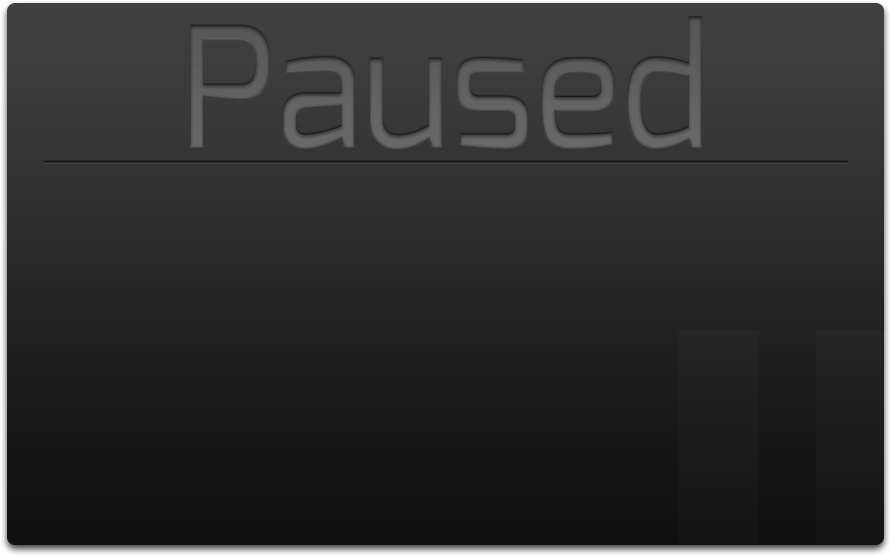
<style>
.page{position:relative;width:892px;height:557px}
.page>*{position:absolute;margin:0}
.t1{font:164px "Exo-Regular";color:#5e5e5e}
</style>
<div class="page">
<p class="t1" style="left:190px;top:17px;width:512px;height:131px">Paused</p>
</div>
